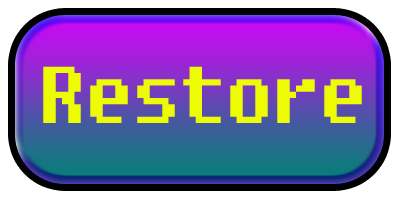
<style>
.page{position:relative;width:400px;height:200px}
.page>*{position:absolute;margin:0}
.t1{font:80px "Fixedsys";letter-spacing:-0.04em;color:#edfb05}
</style>
<div class="page">
<p class="t1" style="left:43px;top:66px;width:319px;height:57px">Restore</p>
</div>
